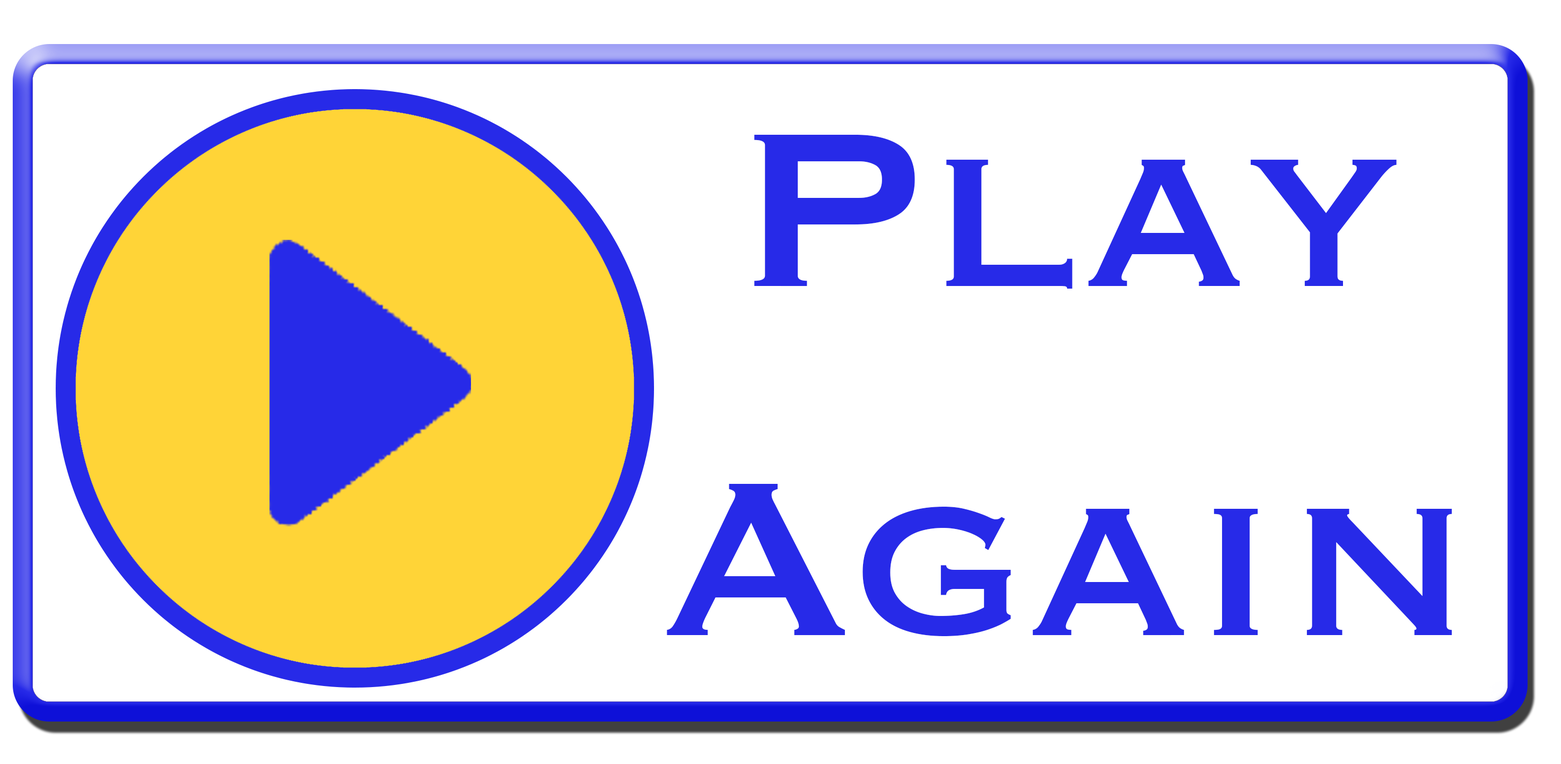
<style>
.page{position:relative;width:1561px;height:764px;background:#ffffff}
.page>*{position:absolute;margin:0}
.t1{font:287.3px "Copperplate";color:#272ae8}
</style>
<div class="page">
<p class="t1" style="left:667px;top:135px;width:785px;height:501px;text-align:center">Play<br>Again</p>
</div>
